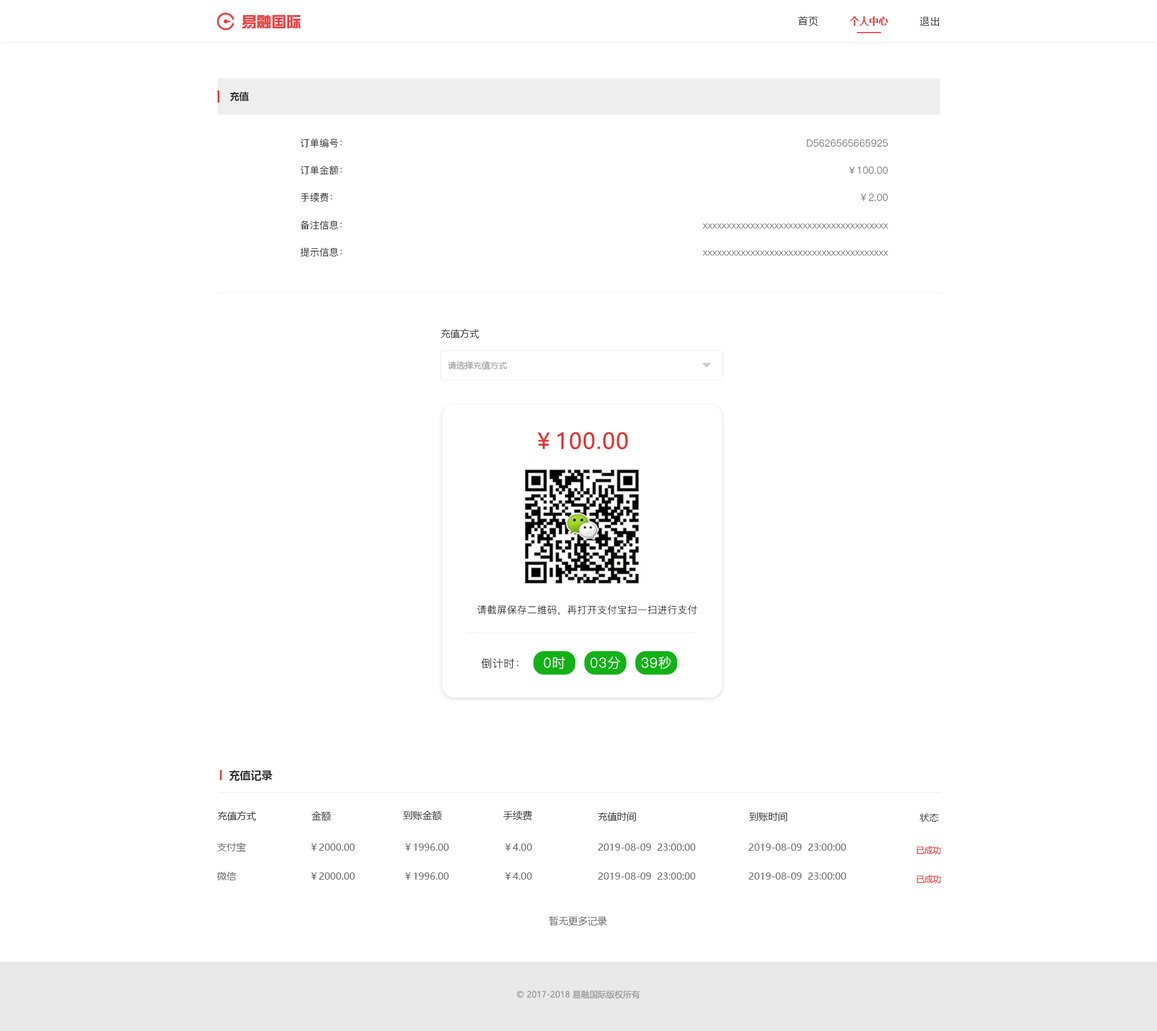
<style>
.page{position:relative;width:1157px;height:1031px;background:#ffffff}
.page>*{position:absolute;margin:0}
.t1{font:14.9px "FZZYJW--GB1-0";color:#ea4342}
.t2{font:9.6px "MicrosoftYaHei";letter-spacing:0.08em;color:#333333}
.t3{font:9.6px "MicrosoftYaHei-Bold";color:#ea4342}
.t4{font:9.6px "MicrosoftYaHei-Bold";letter-spacing:-0.01em;color:#333333}
.t5{font:9.6px "PingFang-SC-Regular";color:#010103}
.t6{font:9.6px "PingFang-SC-Regular";color:#666666}
.t7{font:9.6px "MicrosoftYaHei";color:#333333}
.t8{font:8.4px "MicrosoftYaHei";color:#999999}
.t9{font:21.7px "MicrosoftYaHei";letter-spacing:0.04em;color:#e83030}
.t10{font:9.6px "PingFang-SC-Regular";letter-spacing:0.04em;color:#323232}
.t11{font:10.8px "PingFang-SC-Regular";letter-spacing:0.04em;color:#323232}
.t12{font:13.5px "PingFang-SC-Regular";letter-spacing:0.04em;color:#ffffff}
.t13{font:10.8px "MicrosoftYaHei-Bold";color:#333333}
.t14{font:9.6px "MicrosoftYaHei";color:#666666}
.t15{font:8.4px "MicrosoftYaHei";letter-spacing:-0.01em;color:#ea4342}
.t16{font:8.4px "MicrosoftYaHei";color:#969696;text-transform:uppercase}
</style>
<div class="page">
<p class="t1" style="left:242px;top:14px;width:59px;height:15px">易融国际</p>
<p class="t2" style="left:798px;top:16px;width:20px;height:10px">首页</p>
<p class="t3" style="left:850px;top:16px;width:38px;height:10px">个人中心</p>
<p class="t2" style="left:920px;top:17px;width:20px;height:9px">退出</p>
<p class="t4" style="left:230px;top:92px;width:19px;height:9px">充值</p>
<p class="t5" style="left:300px;top:138px;width:42px;height:10px">订单编号：</p>
<p class="t6" style="left:807px;top:139px;width:81px;height:8px">D5626565665925</p>
<p class="t5" style="left:300px;top:165px;width:42px;height:10px">订单金额：</p>
<p class="t6" style="left:849px;top:166px;width:39px;height:8px">￥100.00</p>
<p class="t5" style="left:300px;top:192px;width:32px;height:10px">手续费：</p>
<p class="t6" style="left:861px;top:193px;width:27px;height:8px">￥2.00</p>
<p class="t5" style="left:300px;top:220px;width:42px;height:10px">备注信息：</p>
<p class="t6" style="left:703px;top:223px;width:185px;height:6px">xxxxxxxxxxxxxxxxxxxxxxxxxxxxxxxxxxxxxxx</p>
<p class="t5" style="left:300px;top:247px;width:42px;height:10px">提示信息：</p>
<p class="t6" style="left:703px;top:250px;width:185px;height:6px">xxxxxxxxxxxxxxxxxxxxxxxxxxxxxxxxxxxxxxx</p>
<p class="t7" style="left:441px;top:328px;width:38px;height:10px">充值方式</p>
<p class="t8" style="left:448px;top:361px;width:59px;height:9px">请选择充值方式</p>
<p class="t9" style="left:538px;top:432px;width:90px;height:17px">￥100.00</p>
<p class="t10" style="left:477px;top:604px;width:220px;height:11px">请截屏保存二维码，再打开支付宝扫一扫进行支付</p>
<p class="t11" style="left:482px;top:658px;width:37px;height:10px">倒计时：</p>
<p class="t12" style="left:544px;top:656px;width:21px;height:13px">0时</p>
<p class="t12" style="left:591px;top:656px;width:30px;height:13px">03分</p>
<p class="t12" style="left:641px;top:656px;width:30px;height:13px">39秒</p>
<p class="t13" style="left:229px;top:770px;width:43px;height:10px">充值记录</p>
<p class="t7" style="left:403px;top:810px;width:39px;height:10px">到账金额</p>
<p class="t7" style="left:503px;top:810px;width:29px;height:10px">手续费</p>
<p class="t7" style="left:218px;top:811px;width:38px;height:9px">充值方式</p>
<p class="t7" style="left:312px;top:811px;width:19px;height:10px">金额</p>
<p class="t7" style="left:598px;top:812px;width:38px;height:9px">充值时间</p>
<p class="t7" style="left:749px;top:812px;width:39px;height:9px">到账时间</p>
<p class="t7" style="left:920px;top:813px;width:19px;height:8px">状态</p>
<p class="t14" style="left:217px;top:842px;width:29px;height:10px">支付宝</p>
<p class="t14" style="left:311px;top:843px;width:44px;height:7px">￥2000.00</p>
<p class="t14" style="left:405px;top:843px;width:44px;height:7px">￥1996.00</p>
<p class="t14" style="left:505px;top:843px;width:27px;height:7px">￥4.00</p>
<p class="t14" style="left:598px;top:843px;width:97px;height:7px">2019-08-09  23:00:00</p>
<p class="t14" style="left:748px;top:843px;width:98px;height:7px">2019-08-09  23:00:00</p>
<p class="t15" style="left:917px;top:846px;width:24px;height:8px">已成功</p>
<p class="t14" style="left:217px;top:871px;width:19px;height:9px">微信</p>
<p class="t14" style="left:311px;top:872px;width:44px;height:7px">￥2000.00</p>
<p class="t14" style="left:405px;top:872px;width:44px;height:7px">￥1996.00</p>
<p class="t14" style="left:505px;top:872px;width:27px;height:7px">￥4.00</p>
<p class="t14" style="left:598px;top:872px;width:97px;height:7px">2019-08-09  23:00:00</p>
<p class="t14" style="left:748px;top:872px;width:98px;height:7px">2019-08-09  23:00:00</p>
<p class="t15" style="left:917px;top:874px;width:24px;height:9px">已成功</p>
<p class="t14" style="left:549px;top:915px;width:58px;height:11px">暂无更多记录</p>
<p class="t16" style="left:516px;top:990px;width:124px;height:9px">© 2017-2018 易融国际版权所有</p>
</div>
